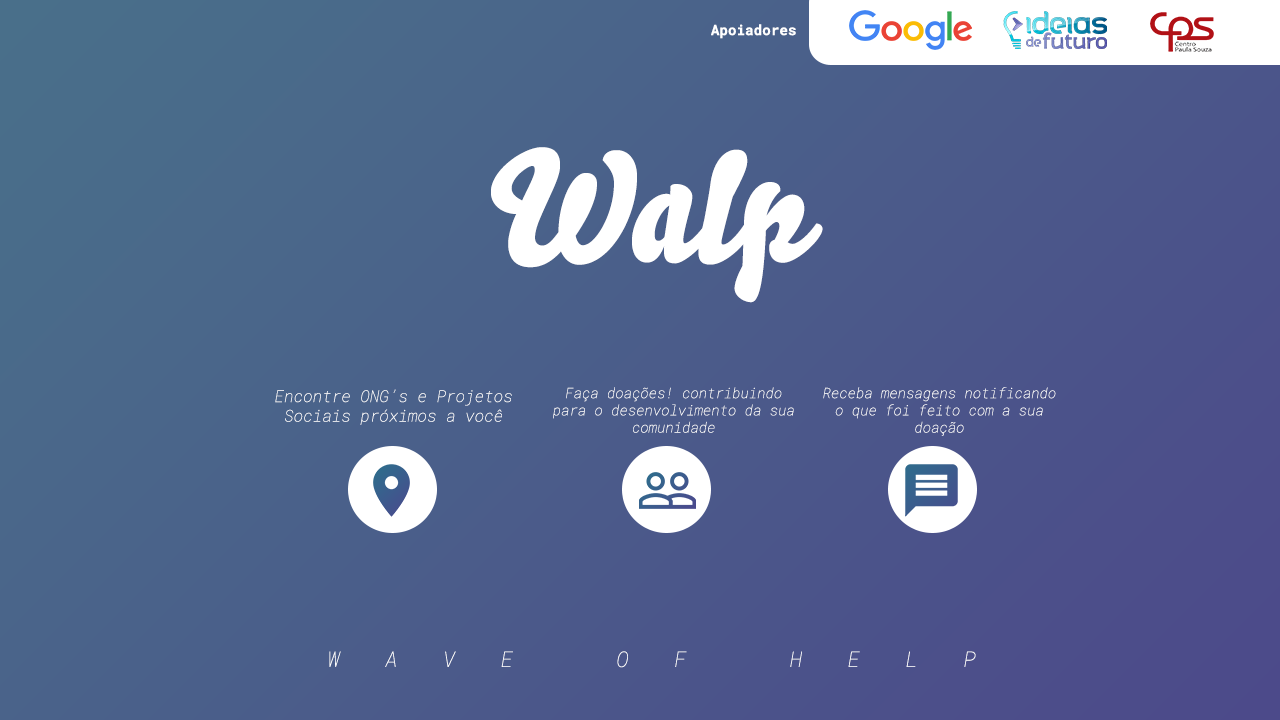
<style>
.page{position:relative;width:1280px;height:720px}
.page>*{position:absolute;margin:0}
.t1{font:14.3px "RobotoMono-Bold";color:#ffffff}
.t2{font:154px "Bello-Pro";color:#ffffff}
.t3{font:16.3px "RobotoMono-ThinItalic";color:#ffffff}
.t4{font:14.3px "RobotoMono-ThinItalic";color:#ffffff}
.t5{font:21.6px "RobotoMono-ThinItalic";letter-spacing:2.1em;color:#ffffff}
</style>
<div class="page">
<p class="t1" style="left:711px;top:24px;width:85px;height:15px">Apoiadores</p>
<p class="t2" style="left:491px;top:147px;width:332px;height:156px">Walp</p>
<p class="t3" style="left:275px;top:389px;width:237px;height:36px;text-align:center">Encontre ONG’s e Projetos Sociais próximos a você</p>
<p class="t4" style="left:553px;top:387px;width:241px;height:46px;text-align:center">Faça doações! contribuindo para o desenvolvimento da sua comunidade</p>
<p class="t4" style="left:823px;top:387px;width:233px;height:49px;text-align:center">Receba mensagens notificando o que foi feito com a sua doação</p>
<p class="t5" style="left:329px;top:651px;width:647px;height:17px">WAVE OF HELP</p>
</div>
